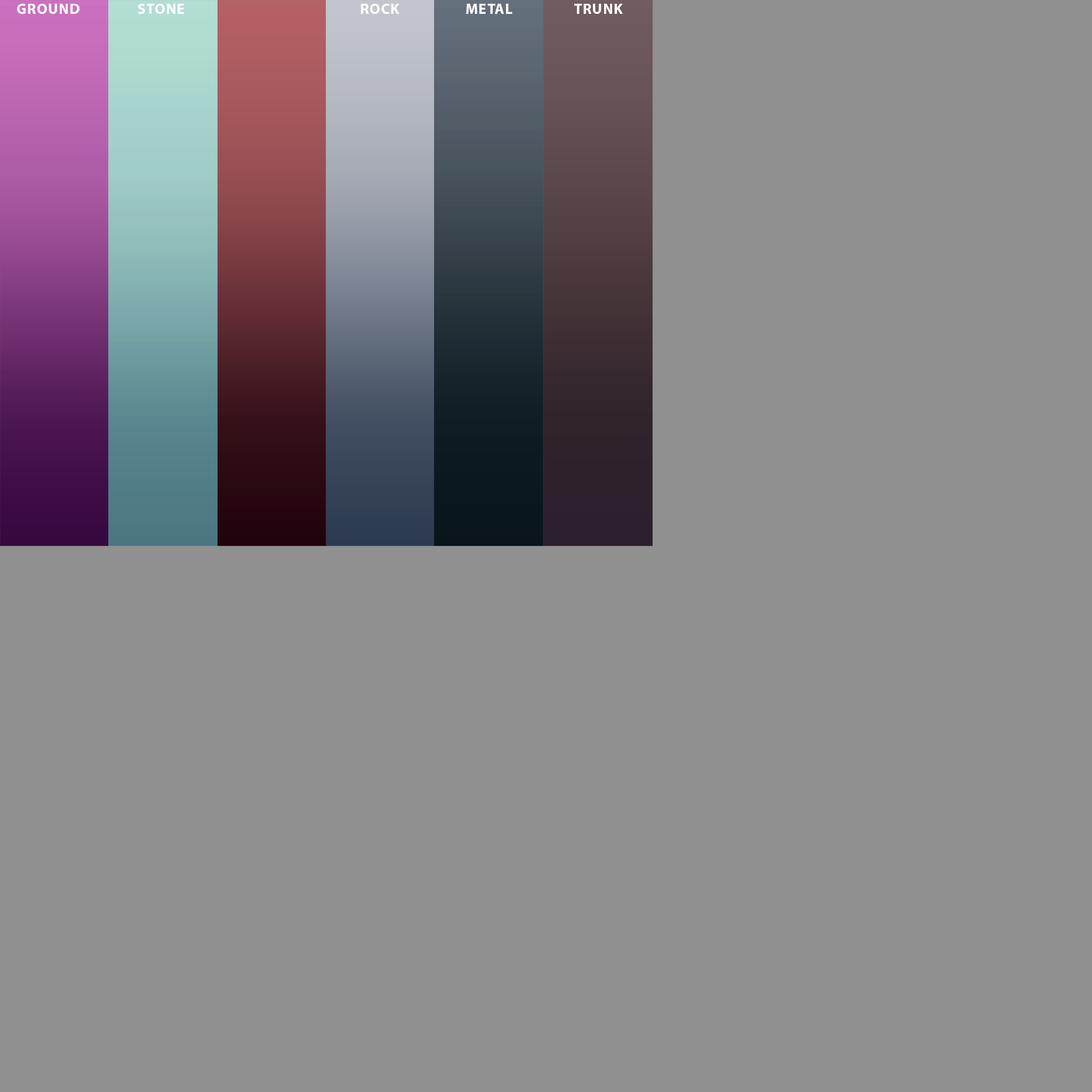
<style>
.page{position:relative;width:1092px;height:1092px;background:#909090}
.page>*{position:absolute;margin:0}
.t1{font:14.7px "MyriadPro-Bold";letter-spacing:0.05em;color:#ffffff}
</style>
<div class="page">
<p class="t1" style="left:17px;top:4px;width:62px;height:10px">GROUND</p>
<p class="t1" style="left:138px;top:4px;width:46px;height:10px">STONE</p>
<p class="t1" style="left:361px;top:4px;width:38px;height:10px">ROCK</p>
<p class="t1" style="left:466px;top:4px;width:46px;height:10px">METAL</p>
<p class="t1" style="left:574px;top:4px;width:49px;height:10px">TRUNK</p>
</div>
